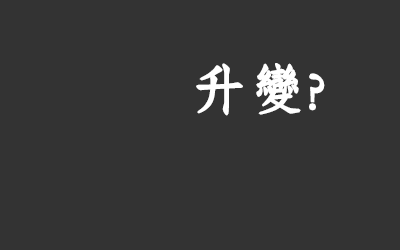
<style>
.page{position:relative;width:400px;height:250px;background:#333333}
.page>*{position:absolute;margin:0}
.t1{font:54.2px "DFFangSong-W6-WINP-BF";letter-spacing:0.04em;color:#ffffff;font-weight:bold}
</style>
<div class="page">
<p class="t1" style="left:196px;top:63px;width:129px;height:53px">升變?</p>
</div>
